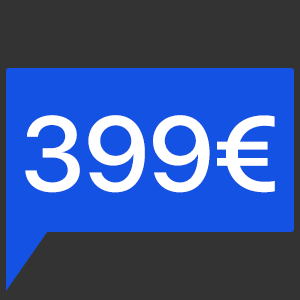
<style>
.page{position:relative;width:300px;height:300px;background:#333333}
.page>*{position:absolute;margin:0}
.t1{font:105px "SFUIDisplay-Medium";color:#ffffff}
</style>
<div class="page">
<p class="t1" style="left:25px;top:115px;width:250px;height:78px">399€</p>
</div>
